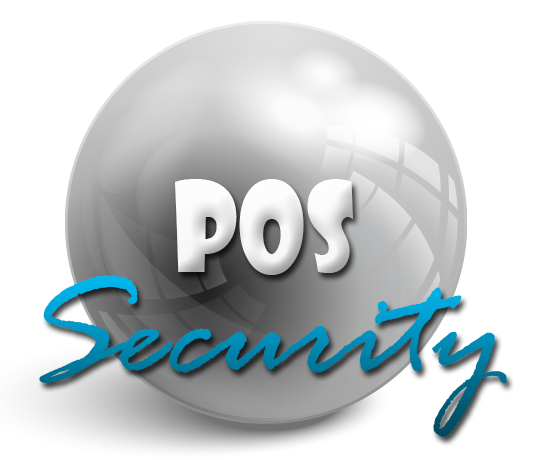
<style>
.page{position:relative;width:537px;height:460px;background:#ffffff}
.page>*{position:absolute;margin:0}
.t1{font:120px "ShowcardGothic-Reg";letter-spacing:0.005em;color:#fdfdfd;scale:0.81 1}
.t2{font:150px "RageItalic";letter-spacing:0.005em}
</style>
<div class="page">
<p class="t1" style="left:175px;top:179px;width:178px;height:96px">POS</p>
<p class="t2" style="left:39px;top:275px;width:468px;height:162px">Security</p>
</div>
